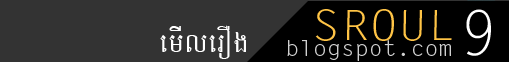
<style>
.page{position:relative;width:509px;height:62px;background:#333333}
.page>*{position:absolute;margin:0}
.t1{font:41.9px "LetterGothicStd";color:#ffc446;scale:1.15 1}
.t2{font:62.2px "LetterGothicStd";color:#ffffff}
.t3{font:22px "LetterGothicStd";color:#d0d0d0;scale:1.05 1}
</style>
<div class="page">
<p class="t1" style="left:315px;top:9px;width:137px;height:32px">SROUL</p>
<p class="t2" style="left:466px;top:9px;width:25px;height:47px">9</p>
<p class="t3" style="left:287px;top:40px;width:164px;height:21px">blogspot.com</p>
</div>
